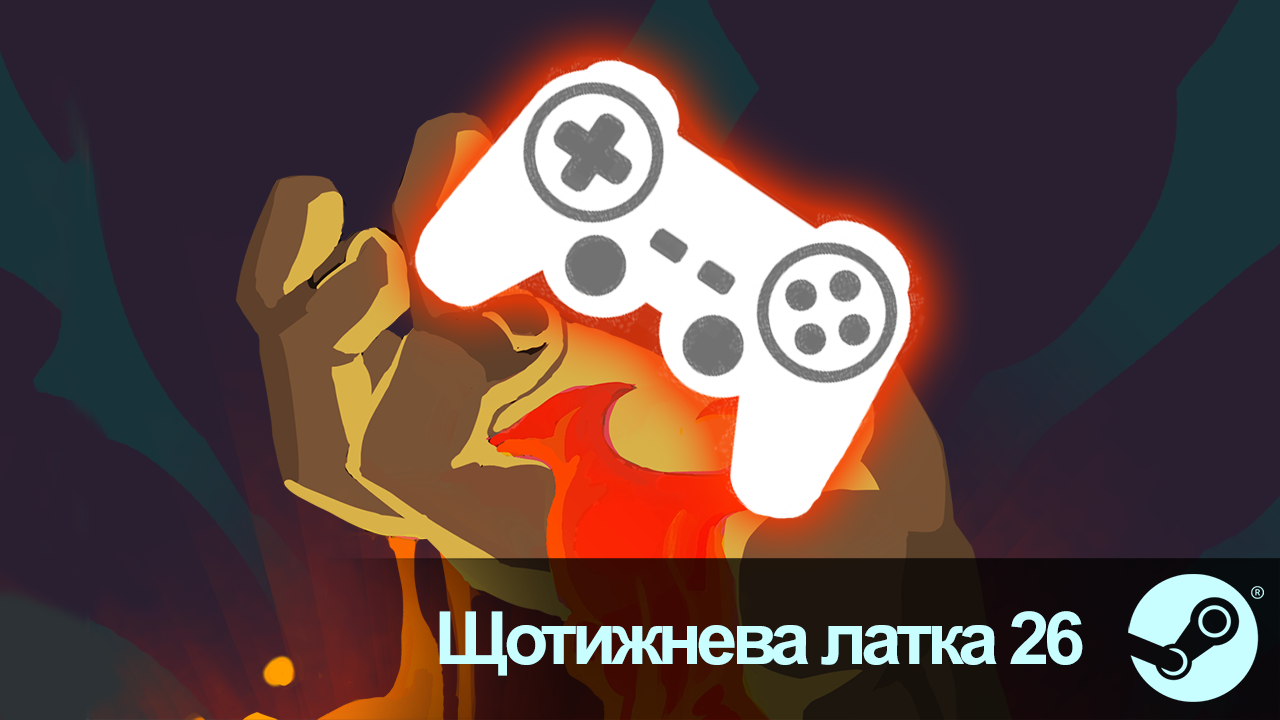
<style>
.page{position:relative;width:1280px;height:720px;background:#291f31}
.page>*{position:absolute;margin:0}
.t1{font:73.3px "Arial-BoldMT";letter-spacing:-0.075em;color:#c8feff}
</style>
<div class="page">
<p class="t1" style="left:439px;top:611px;width:644px;height:65px">Щотижнева латка 26</p>
</div>
